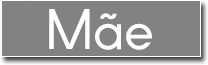
<style>
.page{position:relative;width:208px;height:65px;background:#828282}
.page>*{position:absolute;margin:0}
.t1{font:56px "Arcon-Regular";letter-spacing:-0.011em;color:#ffffff}
</style>
<div class="page">
<p class="t1" style="left:49px;top:9px;width:103px;height:41px">Mãe</p>
</div>
